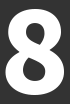
<style>
.page{position:relative;width:70px;height:104px;background:#333333}
.page>*{position:absolute;margin:0}
.t1{font:130.9px "SourceSansPro-Bold";letter-spacing:-0.05em;color:#ffffff}
</style>
<div class="page">
<p class="t1" style="left:5px;top:9px;width:59px;height:86px">8</p>
</div>
